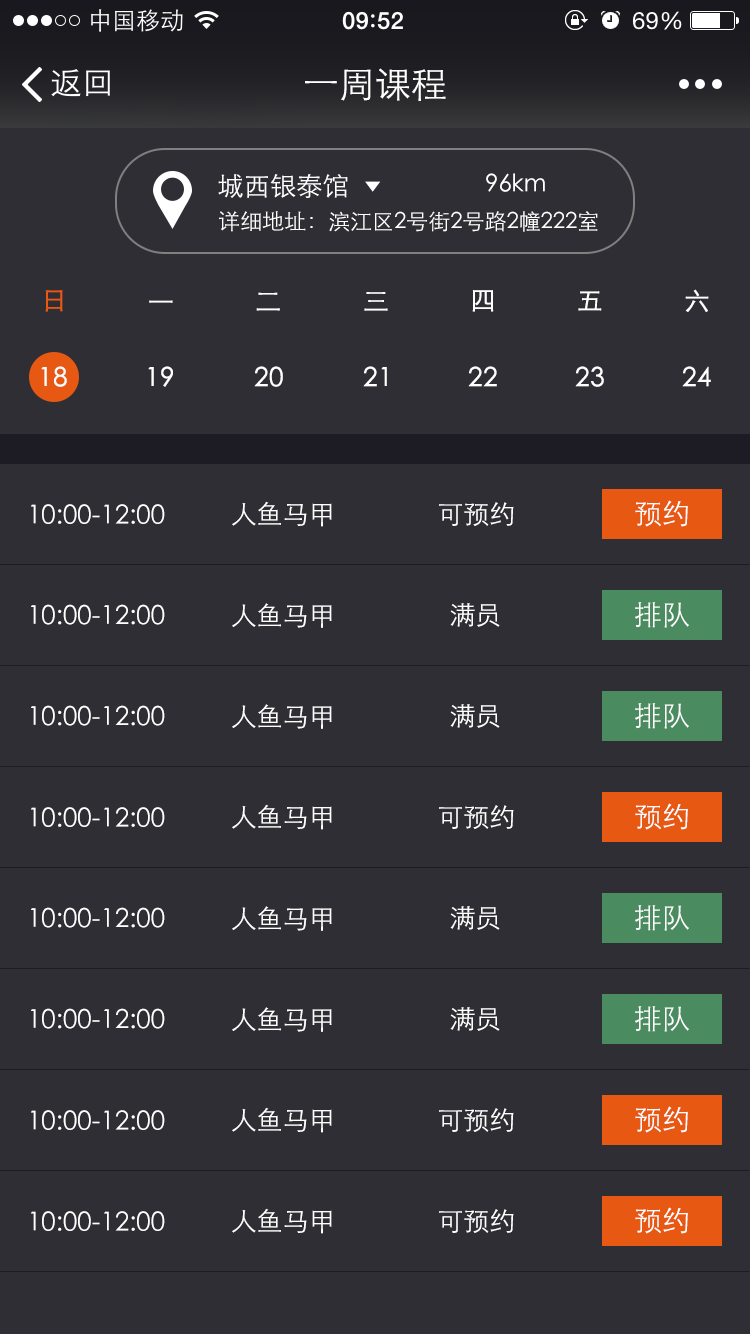
<style>
.page{position:relative;width:750px;height:1334px;background:#2f2e34}
.page>*{position:absolute;margin:0}
.t1{font:36px "STXihei";color:#ffffff}
.t2{font:26px "STXihei";color:#ffffff}
.t3{font:24px "STXihei";color:#ffffff}
.t4{font:22px "STXihei";color:#ffffff}
.t5{font:26px "STXihei";color:#e75813;font-weight:bold}
.t6{font:26px "STXihei";color:#ffffff;font-weight:bold}
.t7{font:28px "STXihei";color:#ffffff}
</style>
<div class="page">
<p class="t1" style="left:305px;top:68px;width:141px;height:33px">一周课程</p>
<p class="t2" style="left:218px;top:174px;width:130px;height:24px">城西银泰馆</p>
<p class="t3" style="left:486px;top:173px;width:59px;height:19px">96km</p>
<p class="t4" style="left:219px;top:211px;width:379px;height:21px">详细地址：滨江区2号街2号路2幢222室</p>
<p class="t5" style="left:45px;top:290px;width:18px;height:22px">日</p>
<p class="t6" style="left:256px;top:292px;width:24px;height:19px">二</p>
<p class="t6" style="left:364px;top:292px;width:24px;height:19px">三</p>
<p class="t6" style="left:472px;top:290px;width:22px;height:22px">四</p>
<p class="t6" style="left:578px;top:291px;width:24px;height:20px">五</p>
<p class="t6" style="left:685px;top:289px;width:24px;height:23px">六</p>
<p class="t6" style="left:149px;top:300px;width:24px;height:3px">一</p>
<p class="t6" style="left:41px;top:366px;width:26px;height:21px">18</p>
<p class="t6" style="left:148px;top:366px;width:25px;height:21px">19</p>
<p class="t6" style="left:254px;top:366px;width:29px;height:21px">20</p>
<p class="t6" style="left:363px;top:366px;width:24px;height:21px">21</p>
<p class="t6" style="left:468px;top:366px;width:29px;height:21px">22</p>
<p class="t6" style="left:575px;top:366px;width:29px;height:21px">23</p>
<p class="t6" style="left:682px;top:366px;width:29px;height:21px">24</p>
<p class="t2" style="left:31px;top:504px;width:134px;height:20px">10:00-12:00</p>
<p class="t2" style="left:232px;top:501px;width:100px;height:26px">人鱼马甲</p>
<p class="t2" style="left:439px;top:502px;width:75px;height:24px">可预约</p>
<p class="t7" style="left:635px;top:500px;width:53px;height:27px">预约</p>
<p class="t2" style="left:31px;top:604px;width:134px;height:21px">10:00-12:00</p>
<p class="t2" style="left:232px;top:603px;width:100px;height:25px">人鱼马甲</p>
<p class="t2" style="left:450px;top:603px;width:50px;height:24px">满员</p>
<p class="t7" style="left:635px;top:602px;width:54px;height:26px">排队</p>
<p class="t2" style="left:31px;top:705px;width:134px;height:21px">10:00-12:00</p>
<p class="t2" style="left:232px;top:704px;width:100px;height:25px">人鱼马甲</p>
<p class="t2" style="left:450px;top:704px;width:50px;height:24px">满员</p>
<p class="t7" style="left:635px;top:703px;width:54px;height:26px">排队</p>
<p class="t2" style="left:31px;top:807px;width:134px;height:20px">10:00-12:00</p>
<p class="t2" style="left:232px;top:804px;width:100px;height:26px">人鱼马甲</p>
<p class="t2" style="left:439px;top:805px;width:75px;height:24px">可预约</p>
<p class="t7" style="left:635px;top:803px;width:53px;height:27px">预约</p>
<p class="t7" style="left:635px;top:905px;width:54px;height:26px">排队</p>
<p class="t2" style="left:31px;top:907px;width:134px;height:21px">10:00-12:00</p>
<p class="t2" style="left:232px;top:906px;width:100px;height:25px">人鱼马甲</p>
<p class="t2" style="left:450px;top:906px;width:50px;height:24px">满员</p>
<p class="t2" style="left:31px;top:1008px;width:134px;height:21px">10:00-12:00</p>
<p class="t2" style="left:232px;top:1007px;width:100px;height:25px">人鱼马甲</p>
<p class="t2" style="left:450px;top:1007px;width:50px;height:24px">满员</p>
<p class="t7" style="left:635px;top:1006px;width:54px;height:26px">排队</p>
<p class="t2" style="left:31px;top:1110px;width:134px;height:20px">10:00-12:00</p>
<p class="t2" style="left:232px;top:1107px;width:100px;height:26px">人鱼马甲</p>
<p class="t2" style="left:439px;top:1108px;width:75px;height:24px">可预约</p>
<p class="t7" style="left:635px;top:1106px;width:53px;height:27px">预约</p>
<p class="t2" style="left:31px;top:1211px;width:134px;height:20px">10:00-12:00</p>
<p class="t2" style="left:232px;top:1208px;width:100px;height:26px">人鱼马甲</p>
<p class="t2" style="left:439px;top:1209px;width:75px;height:24px">可预约</p>
<p class="t7" style="left:635px;top:1207px;width:53px;height:27px">预约</p>
</div>
